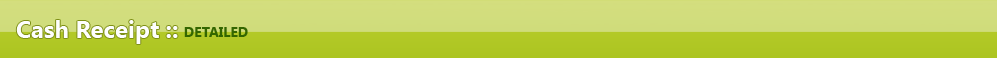
<style>
.page{position:relative;width:997px;height:58px}
.page>*{position:absolute;margin:0}
.t1{font:24px "SegoeUI-Bold";color:#fefefe}
.t2{font:14px "SegoeUI-Bold";color:#336600}
</style>
<div class="page">
<p class="t1" style="left:16px;top:20px;width:162px;height:24px">Cash Receipt ::</p>
<p class="t2" style="left:184px;top:27px;width:64px;height:10px">DETAILED</p>
</div>
